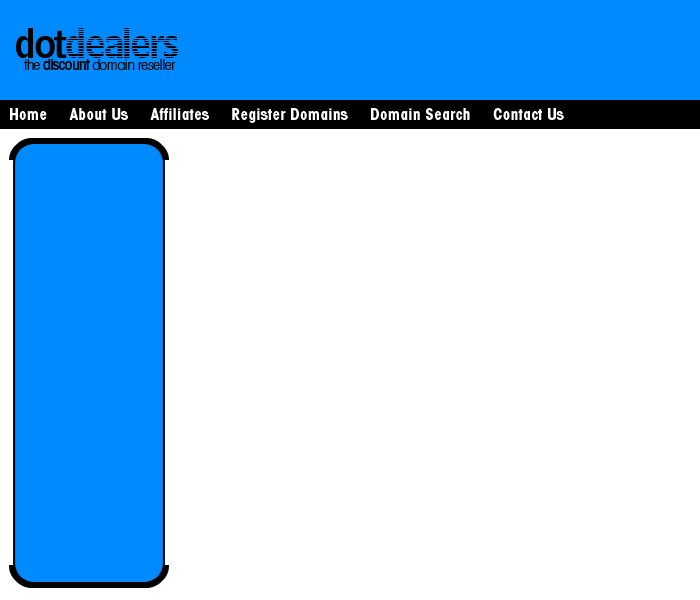
<style>
.page{position:relative;width:700px;height:600px;background:#ffffff}
.page>*{position:absolute;margin:0}
.t1{font:16px "AvantGarde-CondBold";color:#ffffff}
</style>
<div class="page">
<p class="t1" style="left:10px;top:108px;width:554px;height:15px">Home     About Us     Affiliates     Register Domains     Domain Search     Contact Us</p>
</div>
